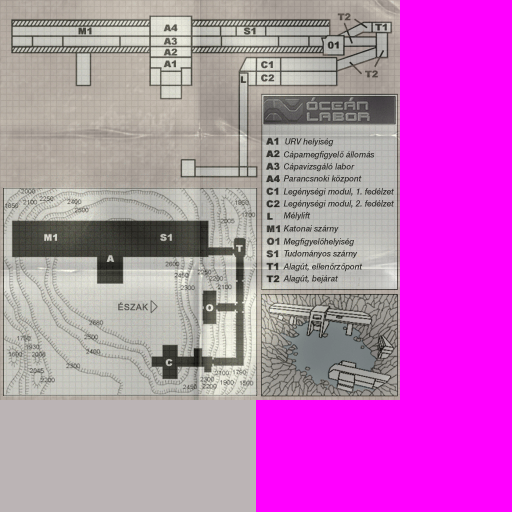
<style>
.page{position:relative;width:512px;height:512px;background:#ff00ff}
.page>*{position:absolute;margin:0}
.t1{font:8.5px "HelveticaNeueLTStd-MdIt";color:#31302d;scale:0.94 1}
.t2{font:8.5px "Arial-ItalicMT";color:#31302d;scale:0.94 1}
.t3{font:8.6px "ArialMT";letter-spacing:0.055em;color:#595853}
</style>
<div class="page">
<p class="t1" style="left:285px;top:138px;width:49px;height:9px">URV helyiség</p>
<p class="t1" style="left:284px;top:151px;width:91px;height:9px">Cápamegfigyel<span class="t2">ő</span> állomás</p>
<p class="t1" style="left:284px;top:163px;width:71px;height:9px">Cápavizsgáló labor</p>
<p class="t1" style="left:283px;top:175px;width:79px;height:9px">Parancsnoki központ</p>
<p class="t1" style="left:283px;top:188px;width:111px;height:9px">Legénységi modul, 1. fedélzet</p>
<p class="t1" style="left:283px;top:200px;width:111px;height:9px">Legénységi modul, 2. fedélzet</p>
<p class="t1" style="left:283px;top:212px;width:28px;height:9px">Mélylift</p>
<p class="t1" style="left:283px;top:225px;width:56px;height:9px">Katonai szárny</p>
<p class="t1" style="left:283px;top:238px;width:71px;height:9px">Megfigyel<span class="t2">ő</span>helyiség</p>
<p class="t1" style="left:284px;top:250px;width:74px;height:9px">Tudományos szárny</p>
<p class="t1" style="left:283px;top:263px;width:80px;height:9px">Alagút, ellen<span class="t2">ő</span>rz<span class="t2">ő</span>pont</p>
<p class="t1" style="left:283px;top:275px;width:55px;height:9px">Alagút, bejárat</p>
<p class="t3" style="left:118px;top:302px;width:30px;height:9px">ÉSZAK</p>
</div>
